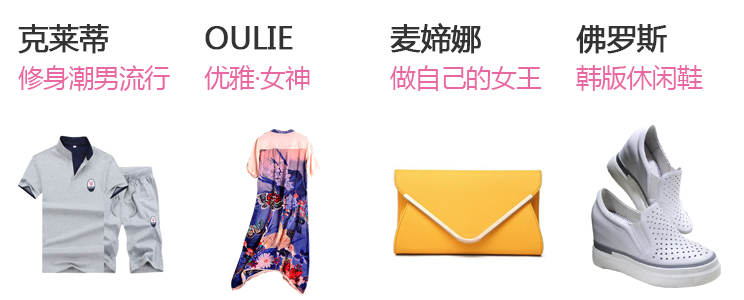
<style>
.page{position:relative;width:744px;height:300px;background:#ffffff}
.page>*{position:absolute;margin:0}
.t1{font:30px "MicrosoftYaHei";letter-spacing:-0.016em;color:#333333;text-transform:uppercase;font-weight:bold}
.t2{font:26px "MicrosoftYaHei";letter-spacing:-0.03em;color:#ea68a2}
</style>
<div class="page">
<p class="t1" style="left:18px;top:24px;width:91px;height:30px">克莱蒂</p>
<p class="t1" style="left:205px;top:26px;width:88px;height:24px">OULIE</p>
<p class="t1" style="left:390px;top:23px;width:91px;height:31px">麦媂娜</p>
<p class="t1" style="left:576px;top:24px;width:91px;height:30px">佛罗斯</p>
<p class="t2" style="left:18px;top:65px;width:152px;height:26px">修身潮男流行</p>
<p class="t2" style="left:204px;top:65px;width:106px;height:25px">优雅·女神</p>
<p class="t2" style="left:390px;top:65px;width:152px;height:26px">做自己的女王</p>
<p class="t2" style="left:576px;top:65px;width:127px;height:26px">韩版休闲鞋</p>
</div>
